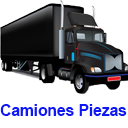
<style>
.page{position:relative;width:128px;height:128px;background:#ffffff}
.page>*{position:absolute;margin:0}
.t1{font:15.5px "Arial-BoldMT";color:#0d18f3}
</style>
<div class="page">
<p class="t1" style="left:0px;top:104px;width:127px;height:12px">Camiones Piezas</p>
</div>
